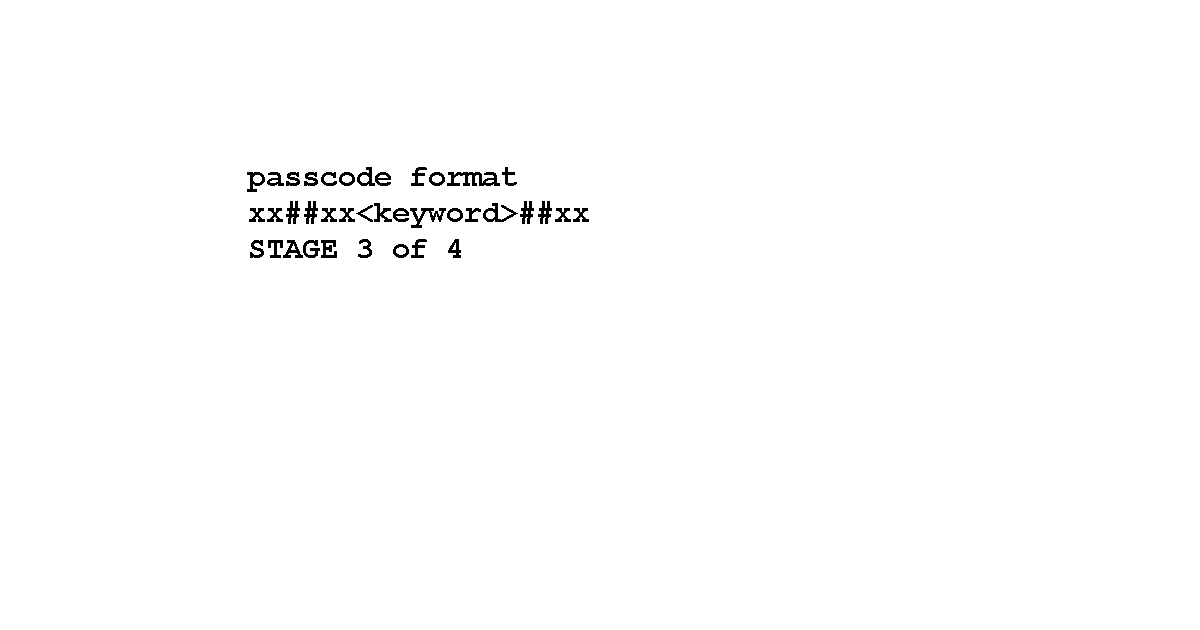
<style>
.page{position:relative;width:1200px;height:630px;background:#ffffff}
.page>*{position:absolute;margin:0}
.t1{font:30px "CourierNewPS-BoldMT";color:#000000}
</style>
<div class="page">
<p class="t1" style="left:247px;top:167px;width:342px;height:91px">passcode format<br>xx##xx&lt;keyword&gt;##xx<br>STAGE 3 of 4</p>
</div>
